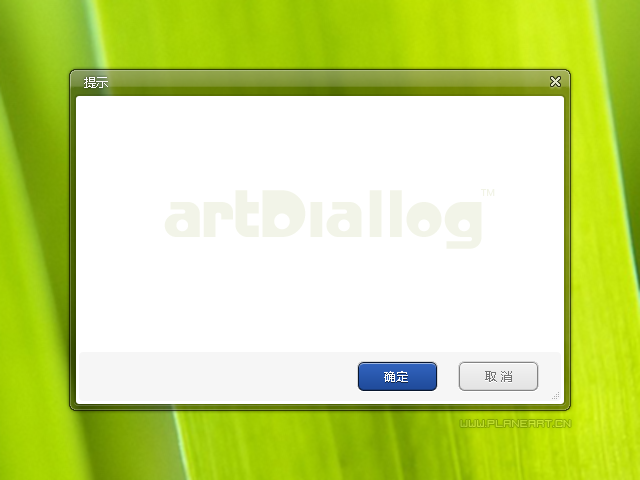
<style>
.page{position:relative;width:640px;height:480px;background:#ffffff}
.page>*{position:absolute;margin:0}
.t1{font:12px "MicrosoftYaHei";color:#ffffff}
.t2{font:72px "CrystalRadioKit";color:#f2f4e8}
.t3{font:9px "MicrosoftYaHei";color:#f1f3e5}
.t4{font:12px "MicrosoftYaHei";color:#727272}
.t5{font:12px "IgnisetGlaciesSharp";color:#c1de2f}
</style>
<div class="page">
<p class="t1" style="left:84px;top:77px;width:24px;height:11px">提示</p>
<p class="t2" style="left:164px;top:190px;width:318px;height:59px">artDiallog</p>
<p class="t3" style="left:481px;top:189px;width:14px;height:7px">TM</p>
<p class="t1" style="left:384px;top:371px;width:24px;height:11px">确定</p>
<p class="t4" style="left:485px;top:371px;width:27px;height:11px">取 消</p>
<p class="t5" style="left:460px;top:420px;width:111px;height:7px">www.planeart.cn</p>
</div>
